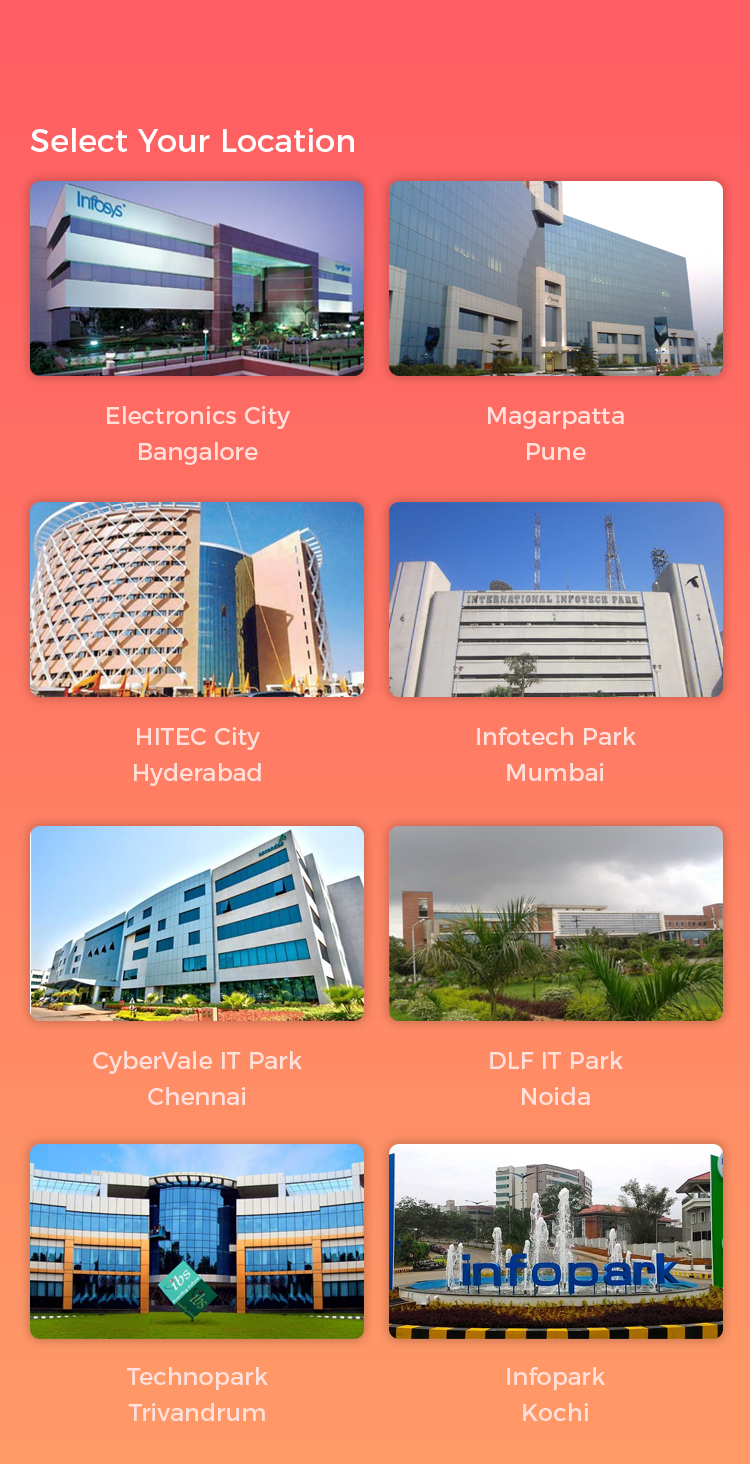
<style>
.page{position:relative;width:750px;height:1464px}
.page>*{position:absolute;margin:0}
.t1{font:32px "Montserrat-Regular";color:#ffffff}
.t2{font:24px/36px "Montserrat-Regular";color:#ffe0db}
</style>
<div class="page">
<p class="t1" style="left:30px;top:128px;width:324px;height:24px">Select Your Location</p>
<p class="t2" style="left:107px;top:406px;width:183px;height:59px;text-align:center">Electronics City<br>Bangalore</p>
<p class="t2" style="left:488px;top:407px;width:136px;height:53px;text-align:center">Magarpatta<br>Pune</p>
<p class="t2" style="left:134px;top:727px;width:127px;height:59px;text-align:center">HITEC City<br>Hyderabad</p>
<p class="t2" style="left:477px;top:727px;width:159px;height:54px;text-align:center">Infotech Park<br>Mumbai</p>
<p class="t2" style="left:93px;top:1051px;width:209px;height:54px;text-align:center">CyberVale IT Park<br>Chennai</p>
<p class="t2" style="left:490px;top:1051px;width:133px;height:54px;text-align:center">DLF IT Park<br>Noida</p>
<p class="t2" style="left:127px;top:1367px;width:141px;height:54px;text-align:center">Technopark<br>Trivandrum</p>
<p class="t2" style="left:507px;top:1367px;width:99px;height:54px;text-align:center">Infopark<br>Kochi</p>
</div>
